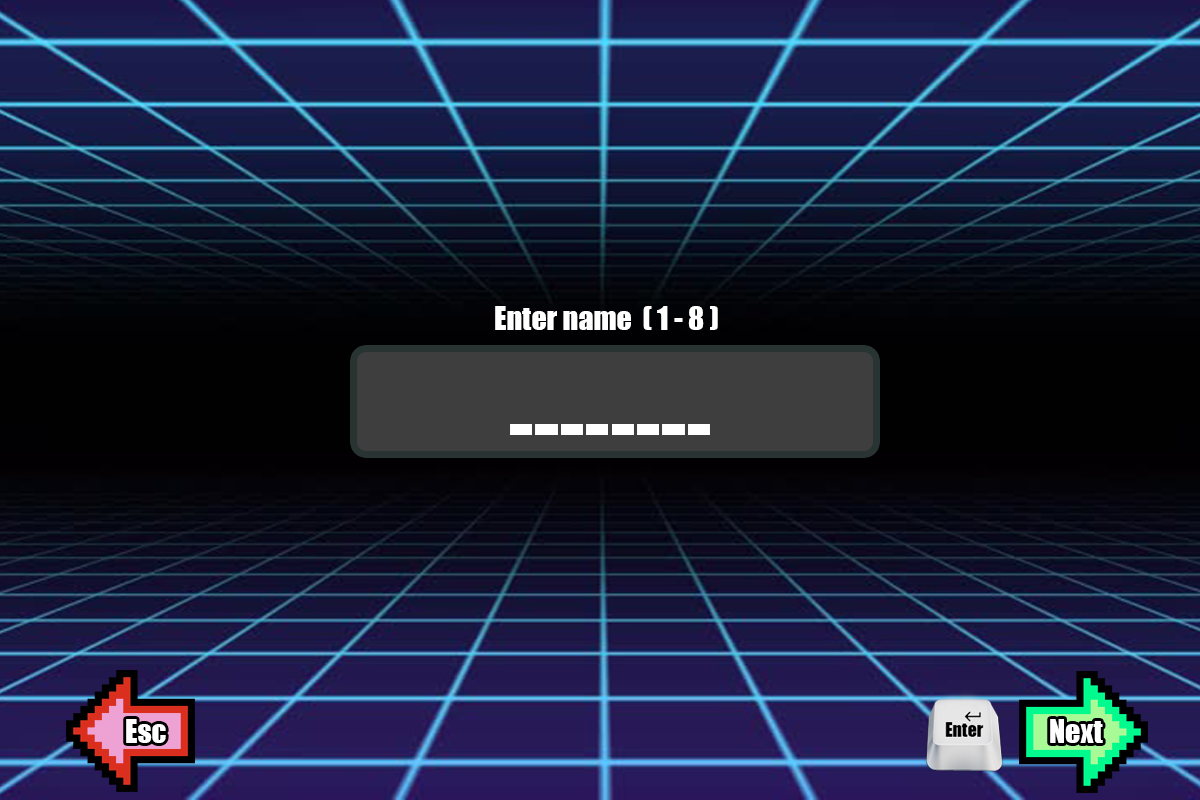
<style>
.page{position:relative;width:1200px;height:800px}
.page>*{position:absolute;margin:0}
.t1{font:30px "Impact";color:#ffffff}
</style>
<div class="page">
<p class="t1" style="left:495px;top:306px;width:223px;height:24px">Enter name  ( 1 - 8 )</p>
<p class="t1" style="left:126px;top:719px;width:40px;height:24px">Esc</p>
<p class="t1" style="left:1050px;top:719px;width:53px;height:24px">Next</p>
</div>
